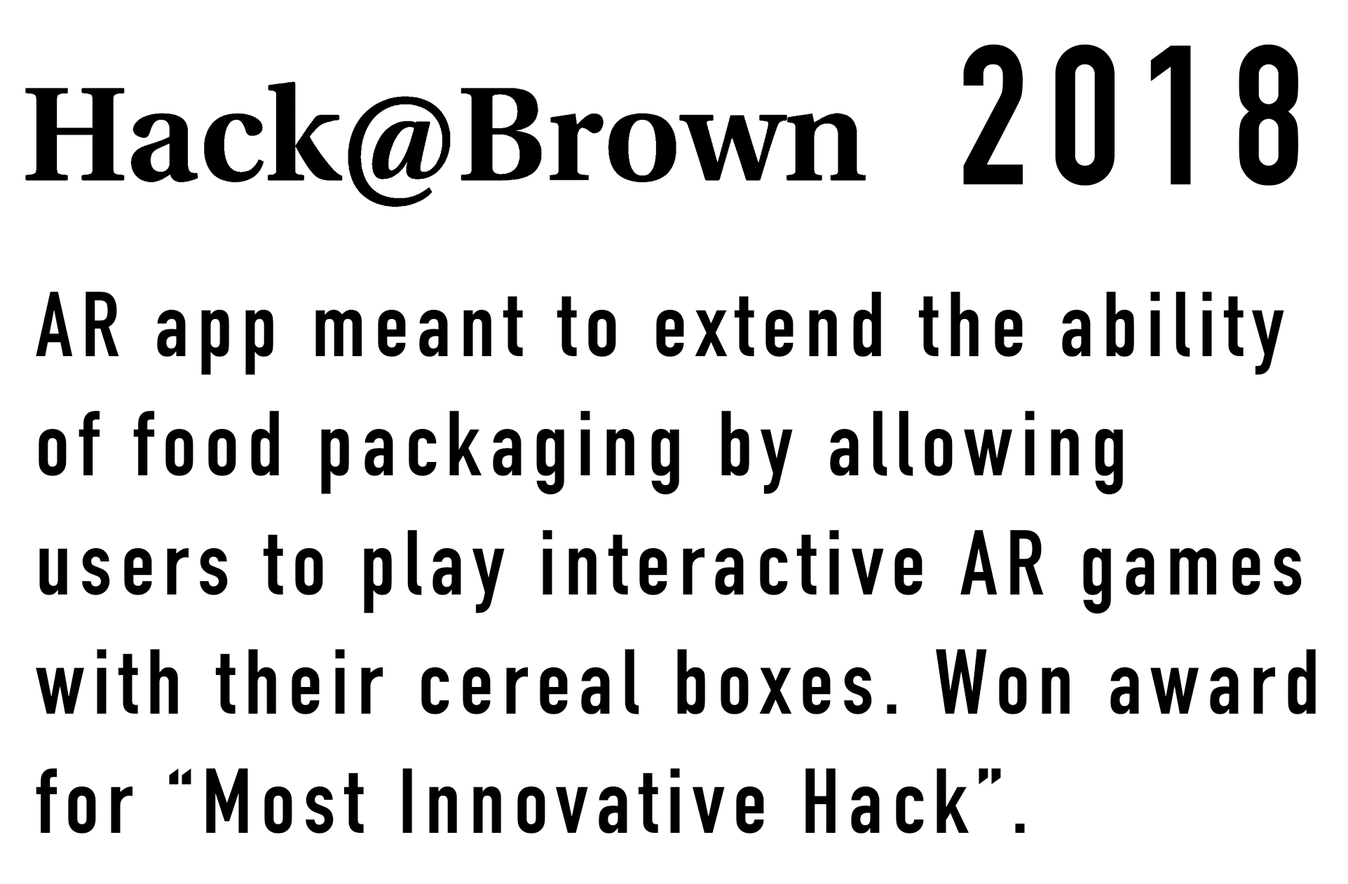
<style>
.page{position:relative;width:1348px;height:884px;background:#ffffff}
.page>*{position:absolute;margin:0}
.t1{font:194.6px "DINCondensed-Bold";letter-spacing:0.1em;color:#000000}
.t2{font:90.6px/119.2px "DINCondensed-Bold";letter-spacing:0.1em;color:#000000}
</style>
<div class="page">
<p class="t1" style="left:964px;top:44px;width:335px;height:142px">2018</p>
<p class="t2" style="left:36px;top:292px;width:1280px;height:542px">AR app meant to extend the ability of food packaging by allowing users to play interactive AR games with their cereal boxes. Won award for “Most Innovative Hack”.</p>
</div>
